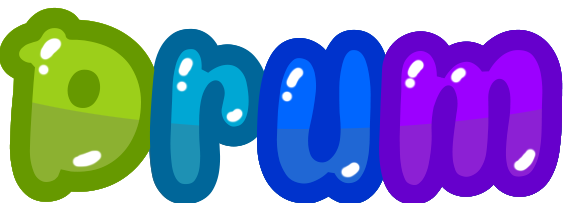
<style>
.page{position:relative;width:570px;height:203px;background:#ffffff}
.page>*{position:absolute;margin:0}
.t1{font:300px "SnackerComicPersonalUseOnly";color:#669900;font-weight:bold}
.t2{font:300px "SnackerComicPersonalUseOnly";color:#006699;font-weight:bold}
.t3{font:300px "SnackerComicPersonalUseOnly";color:#0033cc;font-weight:bold}
.t4{font:300px "SnackerComicPersonalUseOnly";color:#6600cc;font-weight:bold}
</style>
<div class="page">
<p class="t1" style="left:0px;top:7px;width:563px;height:198px">D<span class="t2">r</span><span class="t3">u</span><span class="t4">m</span></p>
</div>
